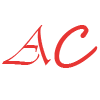
<style>
.page{position:relative;width:100px;height:100px;background:#ffffff}
.page>*{position:absolute;margin:0}
.t1{font:55px "Vivaldii";color:#e73533;text-transform:uppercase}
.t2{font:55px "SegoeScript";color:#e73533;text-transform:uppercase}
</style>
<div class="page">
<p class="t1" style="left:2px;top:25px;width:96px;height:43px">A<span class="t2">C</span></p>
</div>
